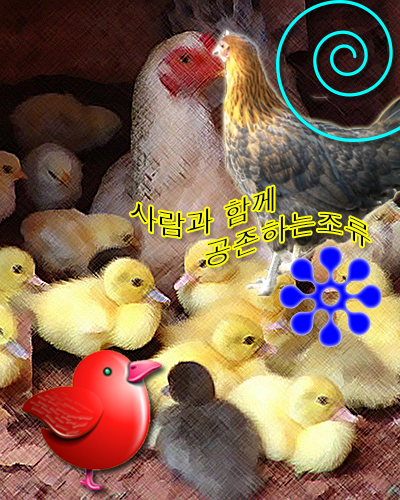
<style>
.page{position:relative;width:400px;height:500px}
.page>*{position:absolute;margin:0}
.t1{font:28.1px "Dotum";color:#000033}
</style>
<div class="page">
<p class="t1" style="left:130px;top:186px;width:241px;height:80px;text-align:center">사람과 함께<br>공존하는조류</p>
</div>
